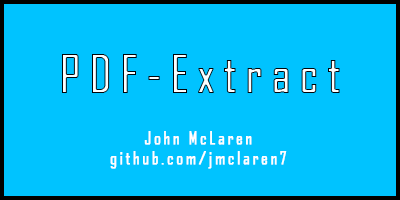
<style>
.page{position:relative;width:400px;height:200px;background:#00c3ff}
.page>*{position:absolute;margin:0}
.t1{font:50px "AgencyFB-Reg";letter-spacing:0.16em;font-weight:bold}
.t2{font:16.7px "AgencyFB-Reg";letter-spacing:0.16em;color:#ffffff;font-weight:bold}
</style>
<div class="page">
<p class="t1" style="left:62px;top:54px;width:278px;height:39px">PDF-Extract</p>
<p class="t2" style="left:110px;top:131px;width:177px;height:38px;text-align:center">John McLaren<br>github.com/jmclaren7</p>
</div>
